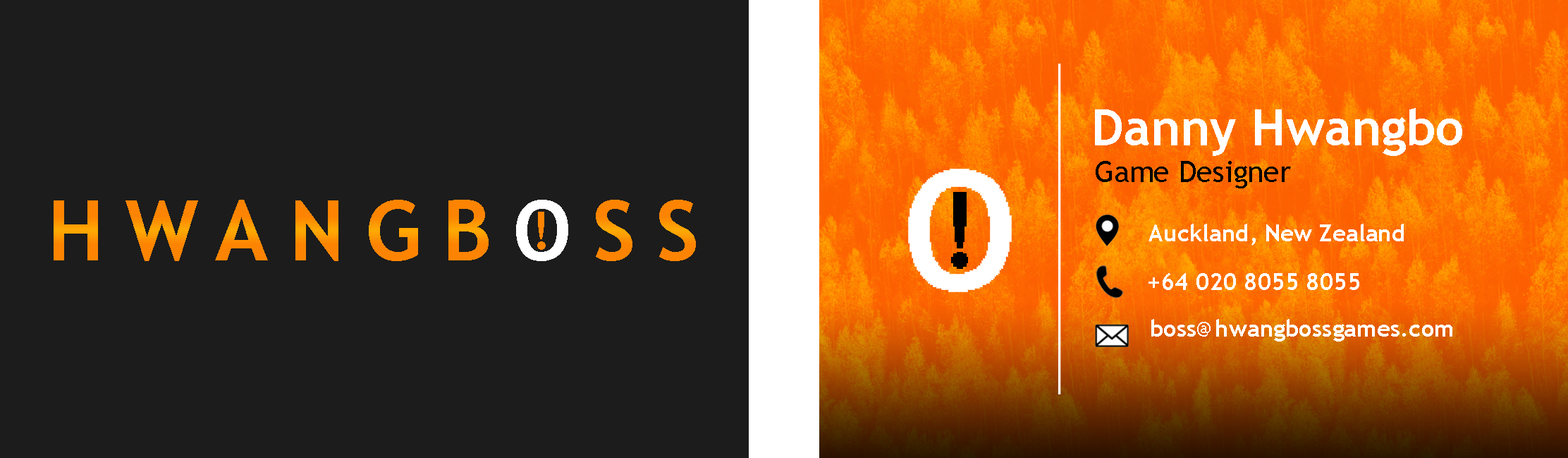
<style>
.page{position:relative;width:1568px;height:458px;background:#1c1c1c}
.page>*{position:absolute;margin:0}
.t1{font:50.2px "TrebuchetMS-Bold";color:#ffffff}
.t2{font:29.4px "TrebuchetMS";color:#010101}
.t3{font:83.6px "TrebuchetMS-Bold";letter-spacing:0.25em;color:#fd8402}
.t4{font:83.6px "TrebuchetMS-Bold";letter-spacing:0.25em;color:#ffffff}
.t5{font:52.2px "TrebuchetMS-Bold";letter-spacing:0.3em;color:#fd8402}
.t6{font:23.5px "TrebuchetMS-Bold";color:#ffffff}
</style>
<div class="page">
<p class="t1" style="left:1095px;top:108px;width:367px;height:48px">Danny Hwangbo</p>
<p class="t2" style="left:1096px;top:161px;width:195px;height:27px">Game Designer</p>
<p class="t3" style="left:54px;top:200px;width:642px;height:61px">HWANGB<span class="t4">O</span>SS</p>
<p class="t5" style="left:537px;top:212px;width:9px;height:38px">!</p>
<p class="t6" style="left:1149px;top:223px;width:255px;height:22px">Auckland, New Zealand</p>
<p class="t6" style="left:1149px;top:273px;width:210px;height:17px">+64 020 8055 8055</p>
<p class="t6" style="left:1151px;top:319px;width:301px;height:22px">boss@hwangbossgames.com</p>
</div>
